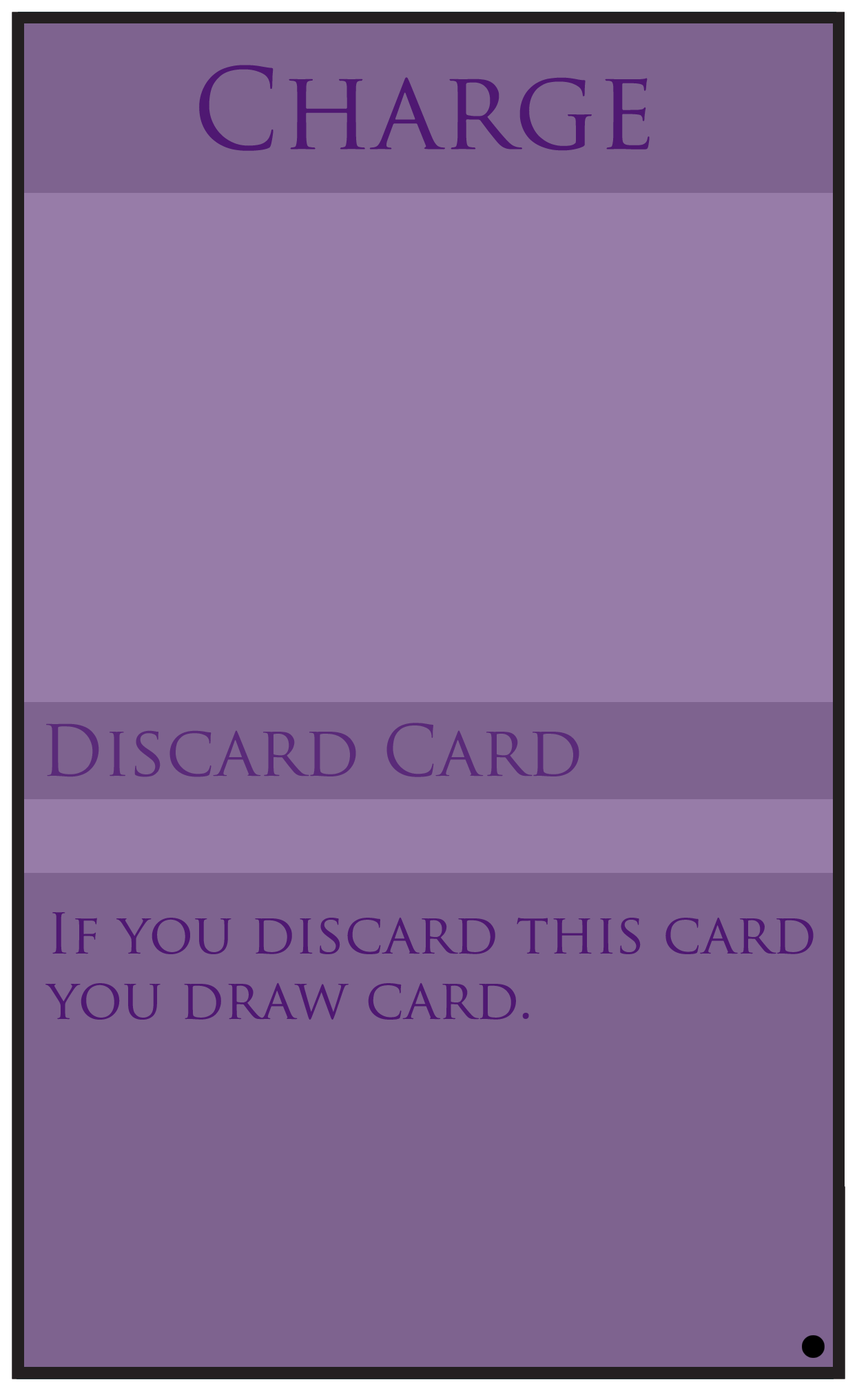
<style>
.page{position:relative;width:857px;height:1391px;background:#7e638f}
.page>*{position:absolute;margin:0}
.t1{font:109.1px "TrajanPro-Regular";color:#4f1872}
.t2{font:68.9px "TrajanPro-Regular";color:#5a2a79}
.t3{font:54.5px "TrajanPro-Regular";color:#4f1872}
</style>
<div class="page">
<p class="t1" style="left:199px;top:65px;width:451px;height:86px">Charge</p>
<p class="t2" style="left:46px;top:723px;width:533px;height:54px">Discard Card</p>
<p class="t3" style="left:45px;top:912px;width:769px;height:108px">If you discard this card <br>you draw card.</p>
</div>
